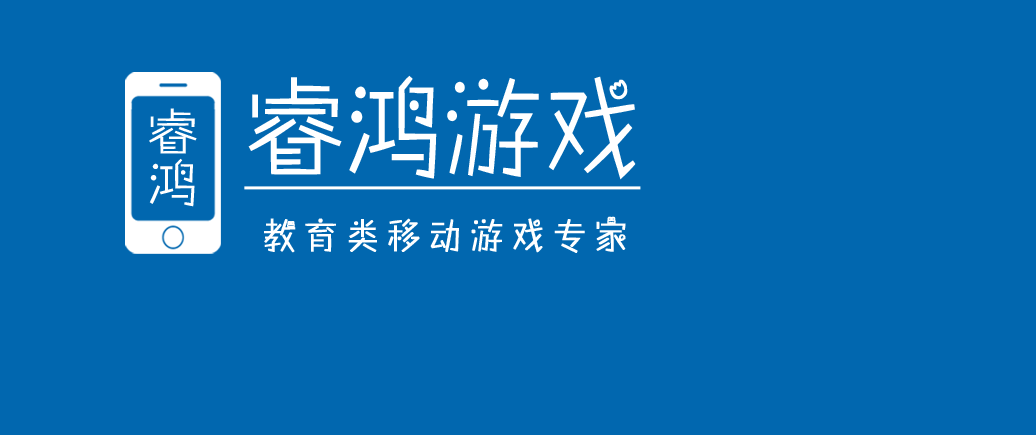
<style>
.page{position:relative;width:1036px;height:435px;background:#0167af}
.page>*{position:absolute;margin:0}
.t1{font:110px "MYuppy-Bold-DDC";color:#ffffff;scale:0.9 1}
.t2{font:51px/38.2px "MYuppy-Bold-DDC";color:#ffffff}
.t3{font:36px "MYuppy-Bold-DDC";letter-spacing:0.25em;color:#ffffff;font-weight:bold;scale:0.9 1}
</style>
<div class="page">
<p class="t1" style="left:248px;top:75px;width:388px;height:105px">睿鸿游戏</p>
<p class="t2" style="left:149px;top:108px;width:48px;height:99px">睿<br>鸿</p>
<p class="t3" style="left:264px;top:216px;width:362px;height:37px">教育类移动游戏专家</p>
</div>
